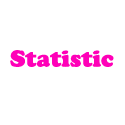
<style>
.page{position:relative;width:125px;height:125px;background:#ffffff}
.page>*{position:absolute;margin:0}
.t1{font:24px "CooperBlack";color:#ff00b8}
</style>
<div class="page">
<p class="t1" style="left:10px;top:50px;width:104px;height:17px">Statistic</p>
</div>
